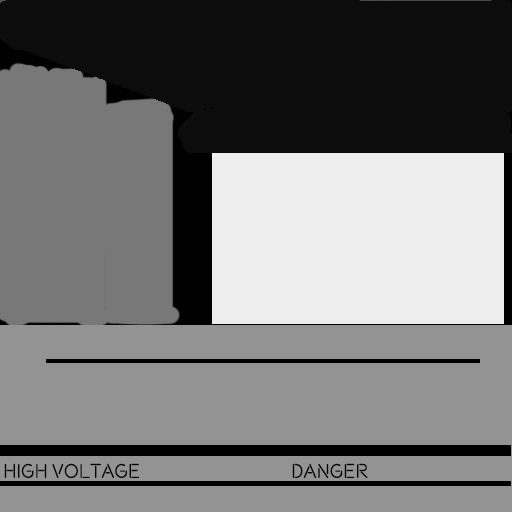
<style>
.page{position:relative;width:512px;height:512px;background:#939393}
.page>*{position:absolute;margin:0}
.t1{font:20px "Beon-Regular";color:#000000}
</style>
<div class="page">
<p class="t1" style="left:4px;top:463px;width:364px;height:15px">high voltage     danger</p>
</div>
